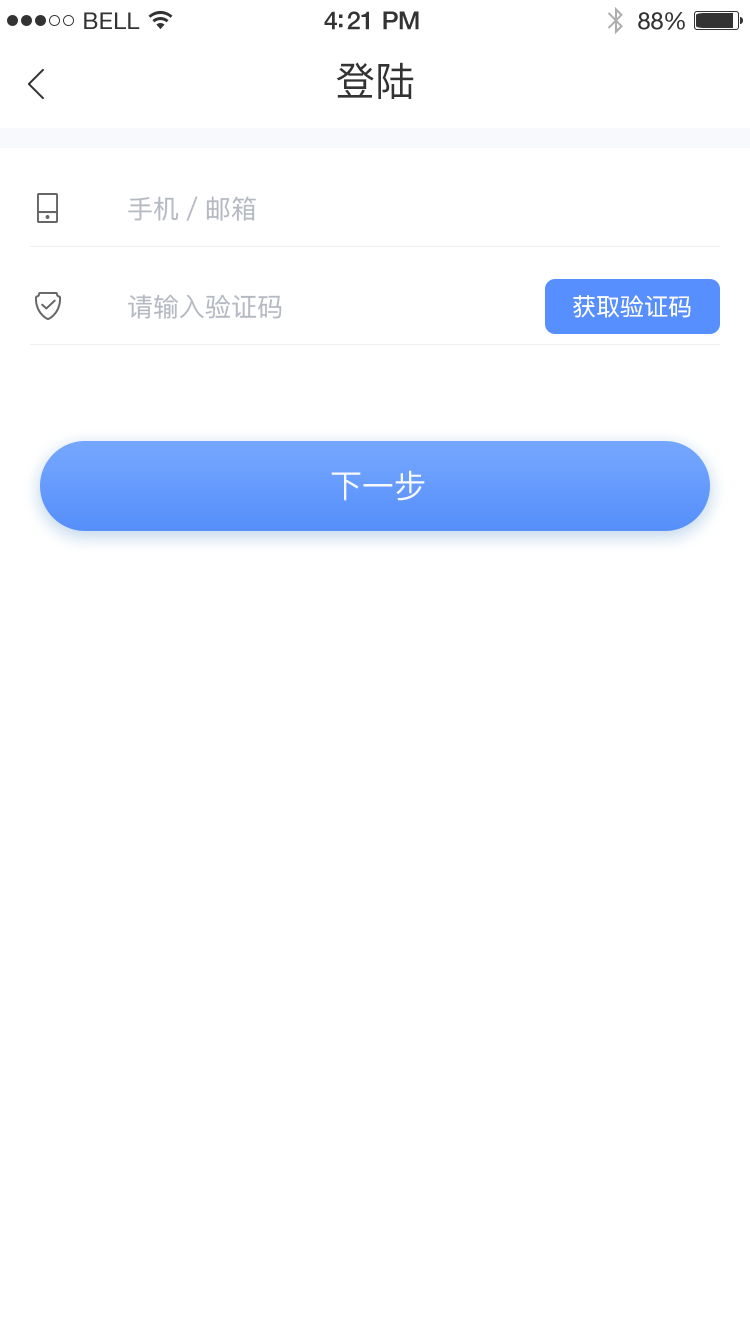
<style>
.page{position:relative;width:750px;height:1334px;background:#ffffff}
.page>*{position:absolute;margin:0}
.t1{font:23px "HelveticaNeue";letter-spacing:0.02em;color:#333333}
.t2{font:25px "HelveticaNeue-Medium";letter-spacing:-0.02em;color:#333333}
.t3{font:24px "HelveticaNeue";letter-spacing:-0.02em;color:#333333}
.t4{font:40px "PingFangSC-Regular";color:#333333}
.t5{font:26px "PingFangSC-Regular";color:#b5b9c2}
.t6{font:24px "PingFangSC-Regular";color:#ffffff}
.t7{font:32px "PingFangSC-Regular";color:#f8f9fc}
</style>
<div class="page">
<p class="t1" style="left:84px;top:12px;width:56px;height:17px">BELL</p>
<p class="t2" style="left:324px;top:11px;width:95px;height:19px">4:21 PM</p>
<p class="t3" style="left:638px;top:12px;width:47px;height:18px">88%</p>
<p class="t4" style="left:336px;top:62px;width:78px;height:37px">登陆</p>
<p class="t5" style="left:128px;top:196px;width:128px;height:25px">手机／邮箱</p>
<p class="t5" style="left:128px;top:294px;width:154px;height:25px">请输入验证码</p>
<p class="t6" style="left:573px;top:295px;width:118px;height:23px">获取验证码</p>
<p class="t7" style="left:331px;top:470px;width:94px;height:31px">下一步</p>
</div>
